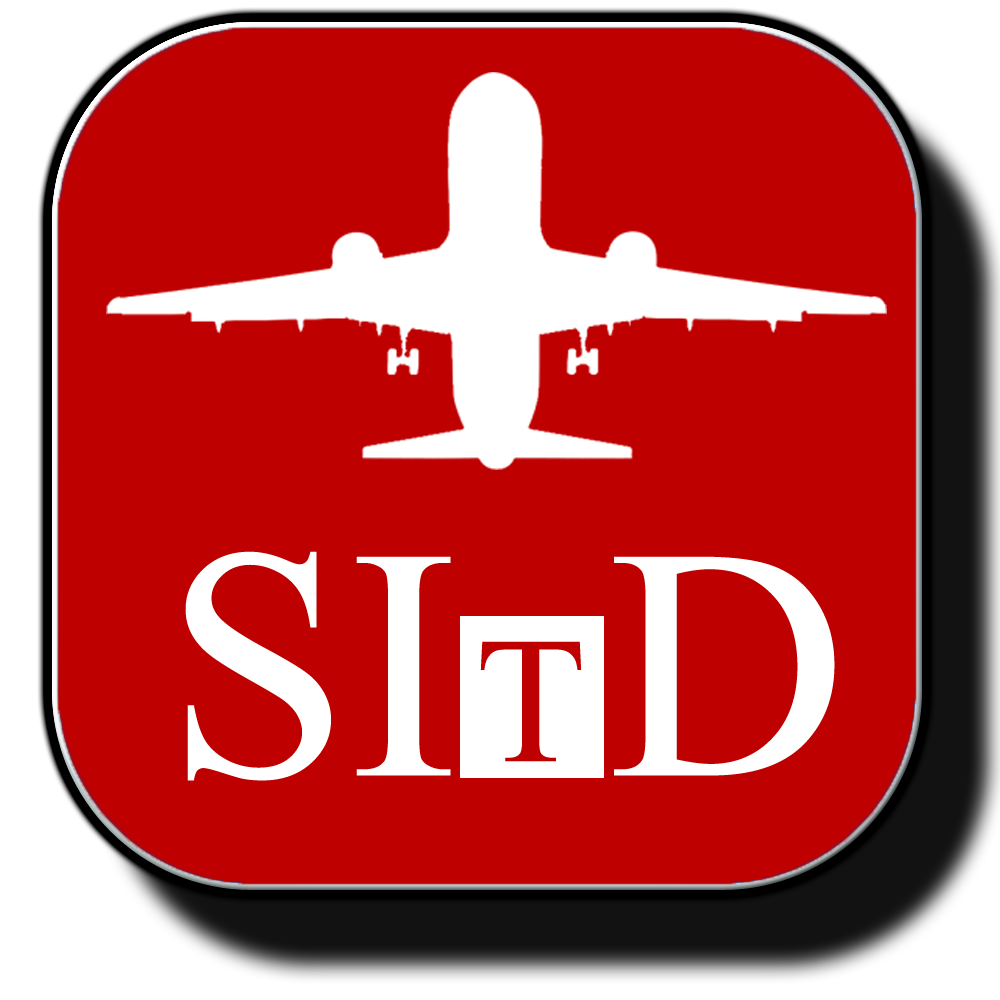
<style>
.page{position:relative;width:1000px;height:1000px;background:#bf0000}
.page>*{position:absolute;margin:0}
.t1{font:330px "TimesNewRomanPSMT";color:#ffffff}
.t2{font:180px "TimesNewRomanPSMT";color:#bf0000}
</style>
<div class="page">
<p class="t1" style="left:185px;top:551px;width:650px;height:230px">SI   D</p>
<p class="t2" style="left:480px;top:641px;width:101px;height:121px">T</p>
</div>
